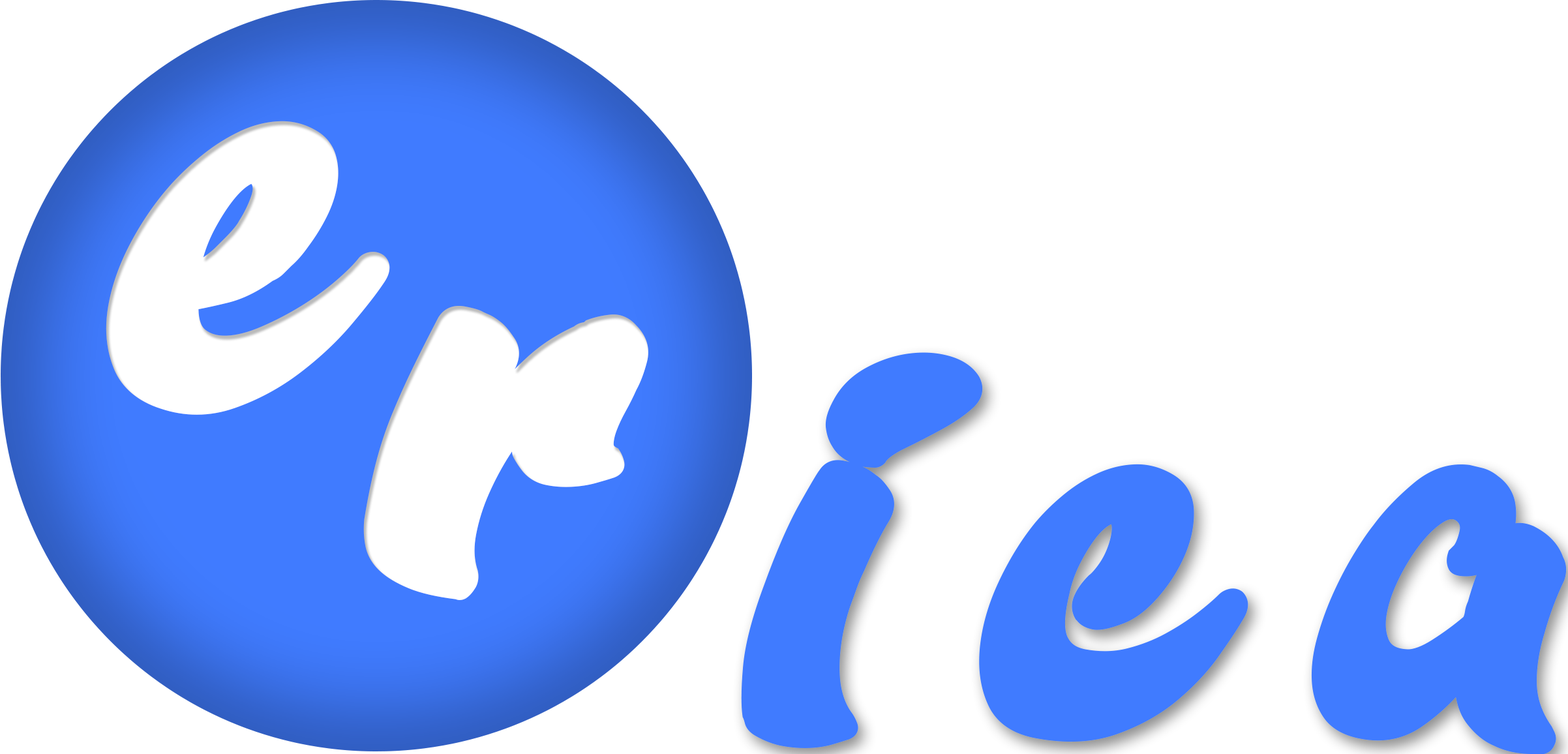
<style>
.page{position:relative;width:1568px;height:754px;background:#ffffff}
.page>*{position:absolute;margin:0}
.t1{font:573.3px "mr_DopestyleG";letter-spacing:-0.02em;color:#ffffff;font-weight:bold}
.t2{font:589.6px "mr_DopestyleG";letter-spacing:-0.02em;color:#ffffff;font-weight:bold}
.t3{font:548.5px "mr_DopestyleG";letter-spacing:0.18em;color:#407bff;font-weight:bold}
</style>
<div class="page">
<p class="t1" style="left:106px;top:121px;width:284px;height:294px">e</p>
<p class="t2" style="left:363px;top:306px;width:285px;height:294px">r</p>
<p class="t3" style="left:741px;top:352px;width:826px;height:403px">ica</p>
</div>
